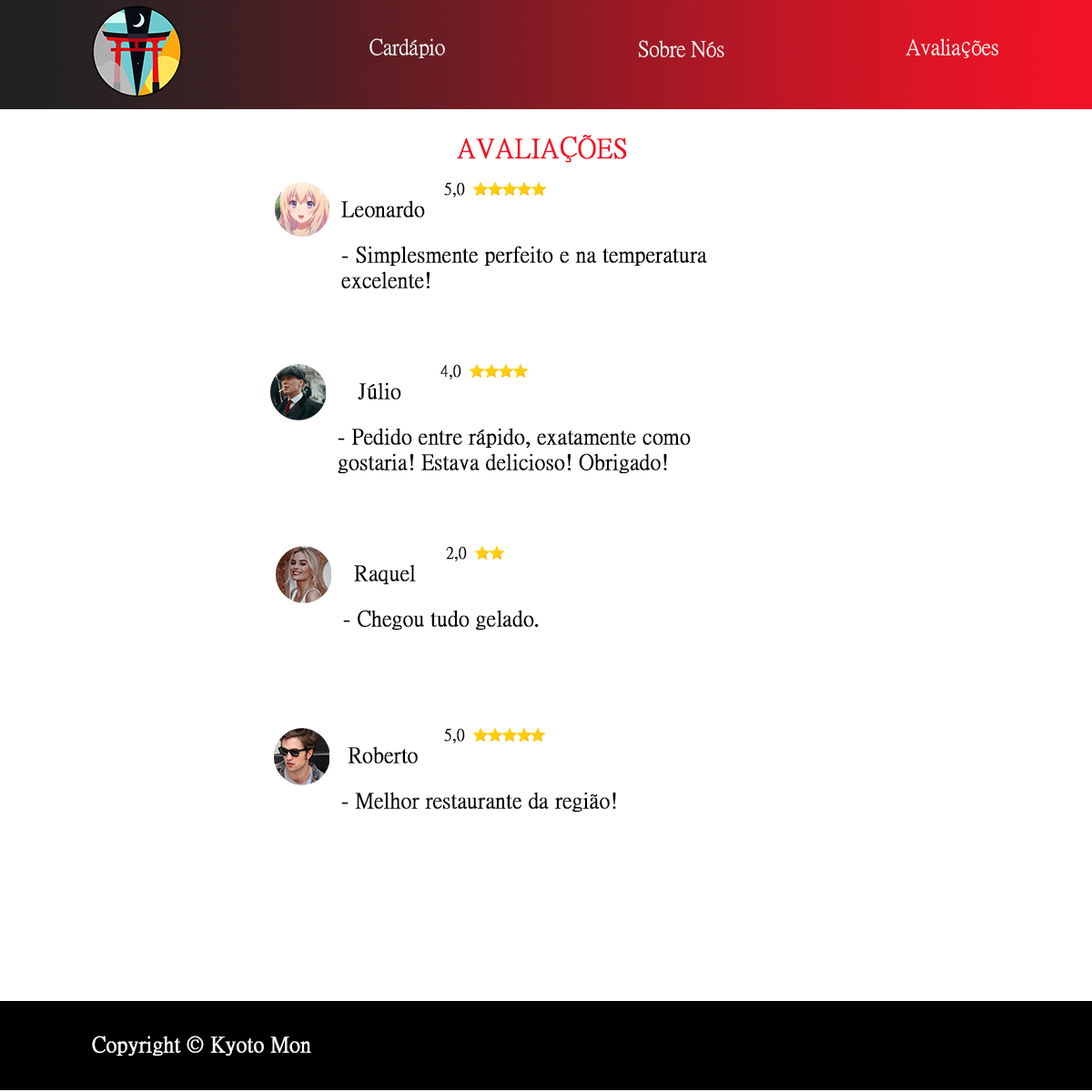
<style>
.page{position:relative;width:1092px;height:1092px;background:#ffffff}
.page>*{position:absolute;margin:0}
.t1{font:21.8px "PMingLiU-ExtB";color:#ffffff}
.t2{font:27.3px "PMingLiU-ExtB";color:#f21326;font-weight:bold}
.t3{font:16.4px "PMingLiU-ExtB";color:#000000;font-weight:bold}
.t4{font:21.8px "PMingLiU-ExtB";color:#000000;font-weight:bold}
.t5{font:21.8px "PMingLiU-ExtB";color:#ffffff;font-weight:bold}
</style>
<div class="page">
<p class="t1" style="left:369px;top:38px;width:76px;height:20px">Cardápio</p>
<p class="t1" style="left:638px;top:40px;width:86px;height:17px">Sobre Nós</p>
<p class="t1" style="left:905px;top:38px;width:93px;height:20px">Avaliações</p>
<p class="t2" style="left:457px;top:135px;width:170px;height:28px">AVALIAÇÕES</p>
<p class="t3" style="left:444px;top:182px;width:21px;height:15px">5,0</p>
<p class="t4" style="left:341px;top:200px;width:84px;height:17px">Leonardo</p>
<p class="t4" style="left:341px;top:246px;width:366px;height:42px">- Simplesmente perfeito e na temperatura excelente!</p>
<p class="t3" style="left:440px;top:364px;width:21px;height:15px">4,0</p>
<p class="t4" style="left:358px;top:382px;width:43px;height:18px">Júlio</p>
<p class="t4" style="left:338px;top:428px;width:353px;height:46px">- Pedido entre rápido, exatamente como gostaria! Estava delicioso! Obrigado!</p>
<p class="t3" style="left:446px;top:546px;width:21px;height:15px">2,0</p>
<p class="t4" style="left:354px;top:564px;width:62px;height:21px">Raquel</p>
<p class="t4" style="left:343px;top:610px;width:196px;height:21px">- Chegou tudo gelado.</p>
<p class="t3" style="left:444px;top:728px;width:21px;height:15px">5,0</p>
<p class="t4" style="left:348px;top:746px;width:70px;height:17px">Roberto</p>
<p class="t4" style="left:341px;top:792px;width:275px;height:21px">- Melhor restaurante da região!</p>
<p class="t5" style="left:92px;top:1036px;width:219px;height:20px">Copyright © Kyoto Mon</p>
</div>
